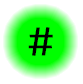
<style>
.page{position:relative;width:83px;height:84px;background:#ffffff}
.page>*{position:absolute;margin:0}
.t1{font:40.7px "Whitney-Book";color:#000000;font-weight:bold}
</style>
<div class="page">
<p class="t1" style="left:28px;top:27px;width:25px;height:29px">#</p>
</div>
